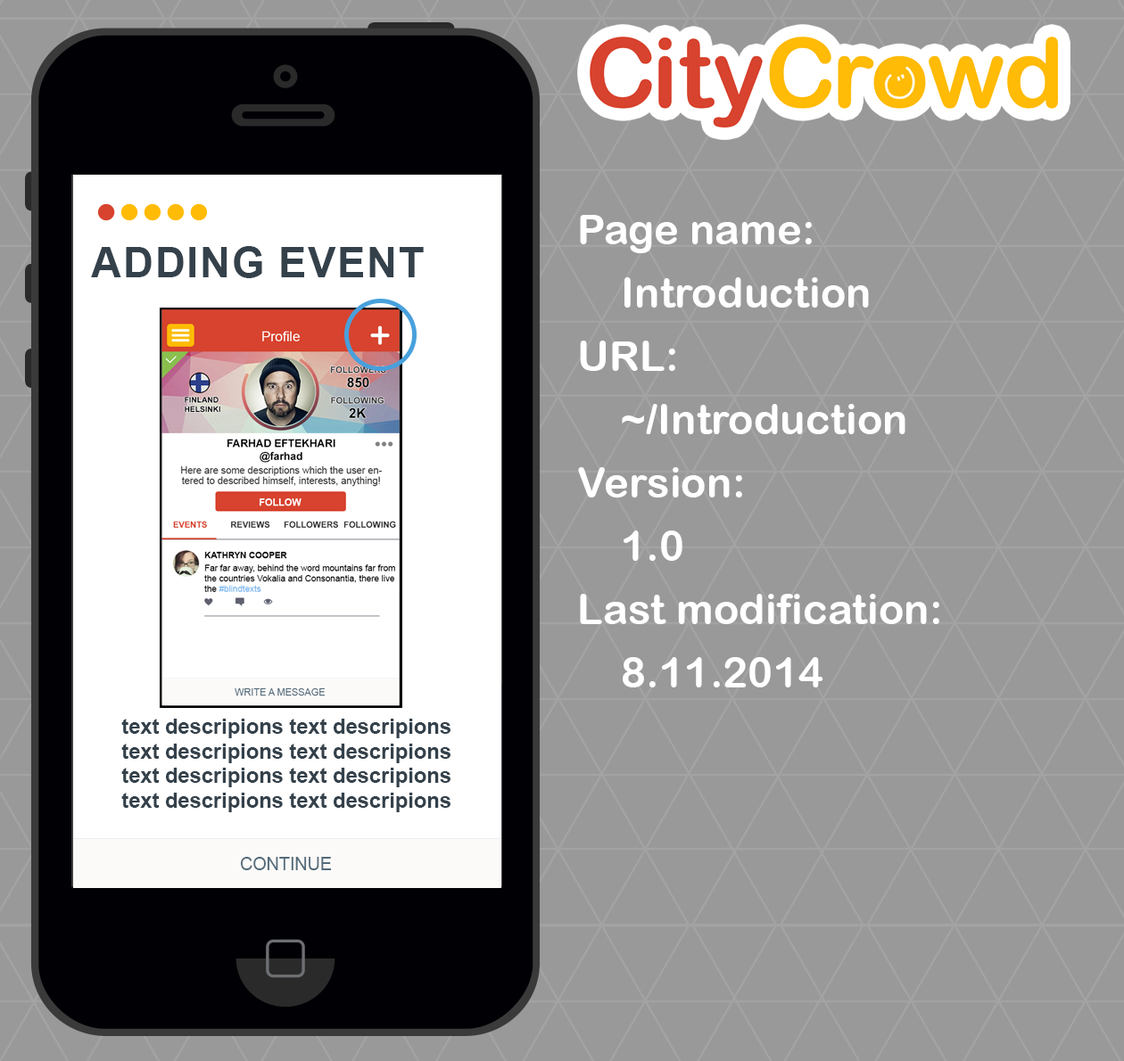
<style>
.page{position:relative;width:1124px;height:1061px;background:#999999}
.page>*{position:absolute;margin:0}
.t1{font:42.2px/63.3px "ArialRoundedMTBold";color:#ffffff}
.t2{font:42.2px "Arial-BoldMT";color:#34414b;text-transform:uppercase}
.t3{font:21.1px/24.6px "Arial-BoldMT";color:#34414b}
.t4{font:17.6px "ArialMT";color:#536a7a}
</style>
<div class="page">
<p class="t1" style="left:578px;top:215px;width:361px;height:473px">Page name:<br>Introduction<br>URL:<br>~/Introduction<br>Version:<br>1.0<br>Last modification:<br>8.11.2014</p>
<p class="t2" style="left:91px;top:246px;width:333px;height:32px">Adding event</p>
<p class="t3" style="left:121px;top:719px;width:329px;height:93px">text descripions text descripions text descripions text descripions text descripions text descripions text descripions text descripions</p>
<p class="t4" style="left:240px;top:857px;width:92px;height:13px">CONTINUE</p>
</div>
